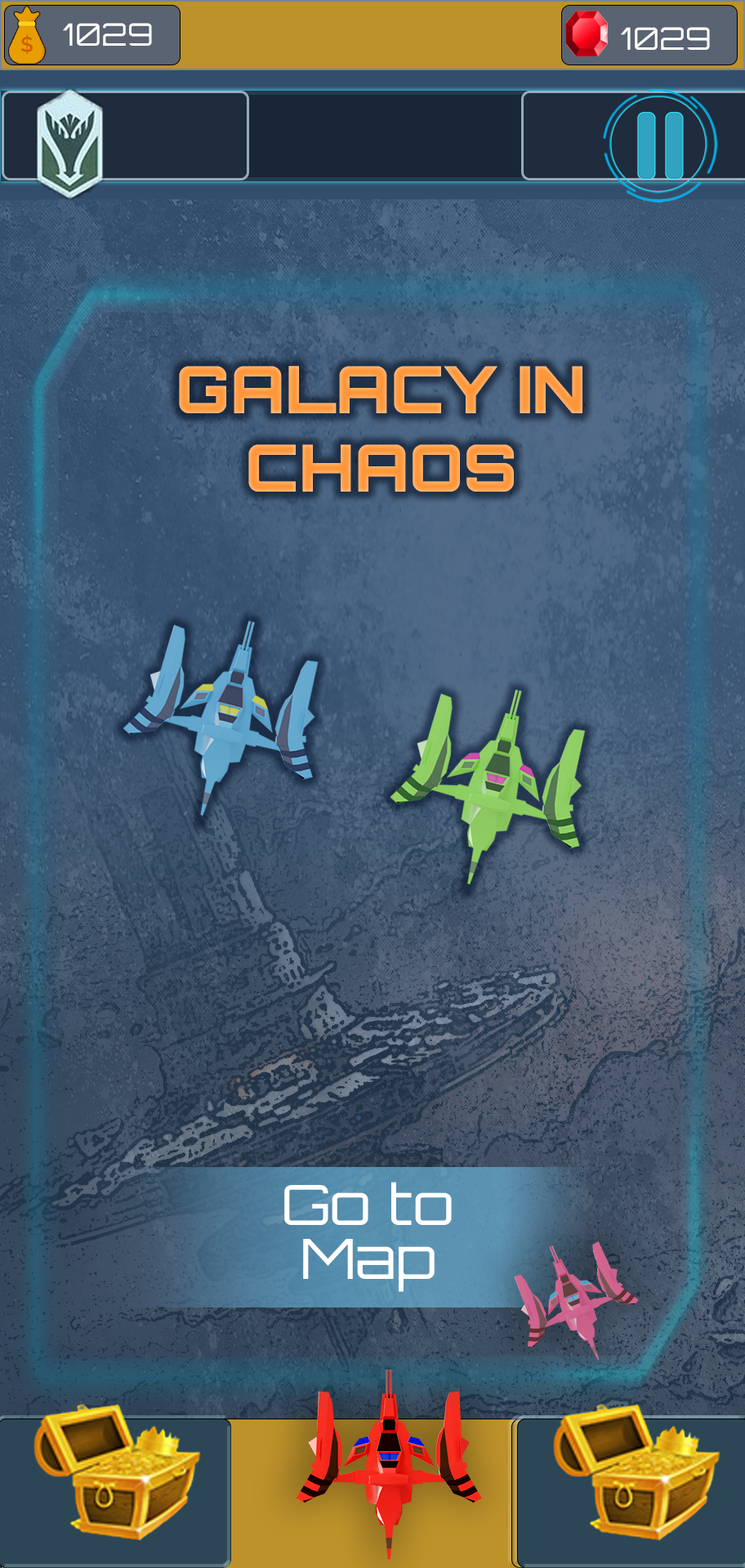
<style>
.page{position:relative;width:745px;height:1568px}
.page>*{position:absolute;margin:0}
.t1{font:31px "Orbitron-Regular";color:#ffffff}
.t2{font:65.3px "Orbitron-Black";color:#ff9f4a}
.t3{font:55.4px/53.6px "Orbitron-Regular";color:#ffffff;scale:1.09 1}
</style>
<div class="page">
<p class="t1" style="left:63px;top:23px;width:89px;height:23px">1029</p>
<p class="t1" style="left:621px;top:27px;width:89px;height:23px">1029</p>
<p class="t2" style="left:179px;top:366px;width:403px;height:126px;text-align:center">GALACY IN<br>CHAOS</p>
<p class="t3" style="left:284px;top:1182px;width:168px;height:110px;text-align:center">Go to Map</p>
</div>
